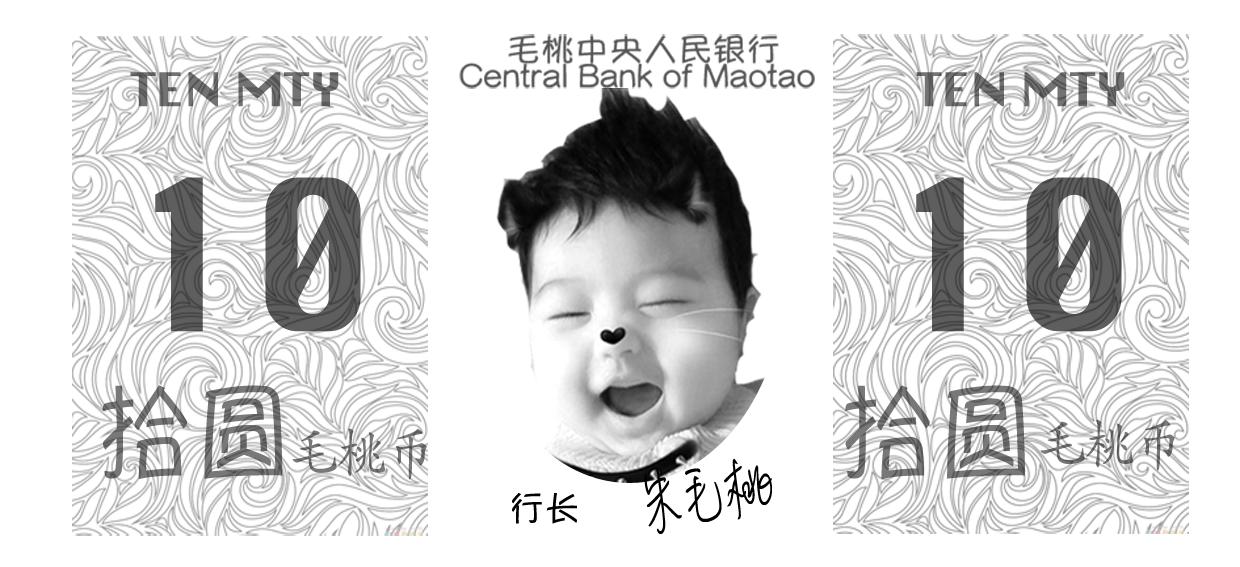
<style>
.page{position:relative;width:1240px;height:567px;background:#ffffff}
.page>*{position:absolute;margin:0}
.t1{font:45.1px "Silom";color:#6c6c6c;scale:1.1 1}
.t2{font:45.1px "Silom";color:#6a6a6a;scale:1.1 1}
.t3{font:204.5px "Silom";color:#5a5a5a;scale:0.93 1}
.t4{font:109px "YuppySC-Regular";color:#717171;scale:0.9 1}
.t5{font:54.5px "STKaiti";color:#6d6d6d;scale:0.9 1}
.t6{font:54.5px "STKaiti";color:#717171;scale:0.9 1}
.t7{font:85.3px "MLingWaiMedium-SC";color:#000000;scale:0.67 1}
.t8{font:35.5px "YuppySC-Regular";color:#000000}
</style>
<div class="page">
<p class="t1" style="left:130px;top:72px;width:209px;height:35px">TEN MTY</p>
<p class="t2" style="left:916px;top:72px;width:209px;height:35px">TEN MTY</p>
<p class="t3" style="left:155px;top:177px;width:206px;height:155px">10</p>
<p class="t3" style="left:916px;top:177px;width:206px;height:155px">10</p>
<p class="t4" style="left:102px;top:385px;width:181px;height:94px">拾圆</p>
<p class="t4" style="left:845px;top:385px;width:180px;height:94px">拾圆</p>
<p class="t5" style="left:1040px;top:419px;width:135px;height:52px">毛桃币</p>
<p class="t6" style="left:292px;top:428px;width:135px;height:52px">毛桃币</p>
<p class="t7" style="left:644px;top:458px;width:128px;height:76px;rotate:-9deg">朱毛桃</p>
<p class="t8" style="left:512px;top:493px;width:65px;height:31px">行长</p>
</div>
